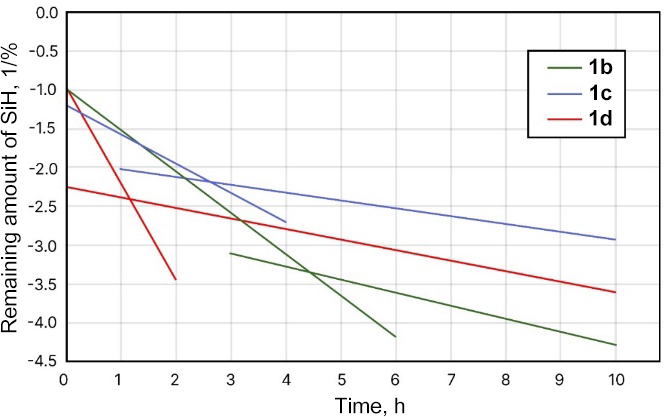
<style>
.page{position:relative;width:666px;height:417px;background:#ffffff}
.page>*{position:absolute;margin:0}
.t1{font:21.4px "ArialUnicodeMS";color:#000000}
.t2{font:21.4px "Arial-BoldMT";color:#000000}
</style>
<div class="page">
<p class="t1" style="left:0px;top:43px;width:21px;height:290px;rotate:-90deg">Remaining amount of SiH, 1/%</p>
<p class="t2" style="left:589px;top:58px;width:24px;height:17px">1b</p>
<p class="t2" style="left:590px;top:84px;width:22px;height:17px">1c</p>
<p class="t2" style="left:589px;top:110px;width:23px;height:16px">1d</p>
<p class="t1" style="left:335px;top:397px;width:70px;height:20px">Time, h</p>
</div>
